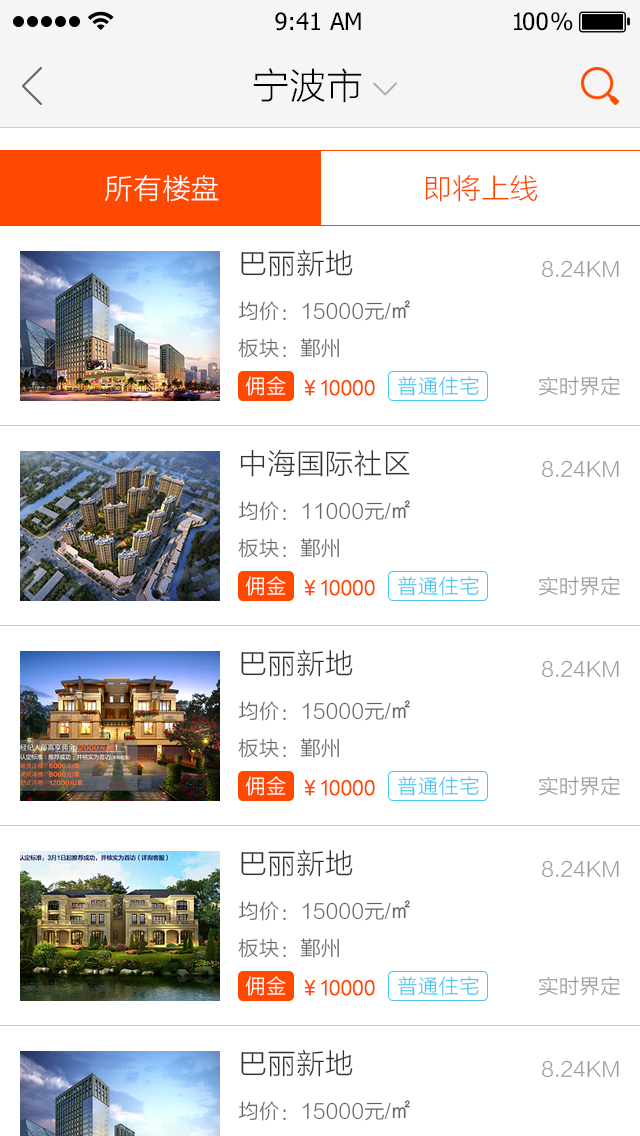
<style>
.page{position:relative;width:640px;height:1136px;background:#ffffff}
.page>*{position:absolute;margin:0}
.t1{font:24px "Tahoma";color:#000000}
.t2{font:24px "Tahoma";letter-spacing:-0.1em;color:#000000}
.t3{font:24px "Tahoma";letter-spacing:-0.25em;color:#000000}
.t4{font:36px "STHeitiSC-Light";color:#000000}
.t5{font:28px "STHeitiSC-Light";color:#ffffff}
.t6{font:28px "STHeitiSC-Light";color:#ff4800}
.t7{font:28px "STHeitiSC-Light";color:#333333}
.t8{font:20px "STHeitiSC-Light";color:#999999}
.t9{font:20px "STHeitiSC-Light";color:#666666}
.t10{font:20px "STHeitiSC-Light";color:#ffffff}
.t11{font:20px "STHeitiSC-Light";color:#47c8f2}
.t12{font:20px "MicrosoftYaHeiLight";color:#ff4800;font-weight:bold}
</style>
<div class="page">
<p class="t1" style="left:275px;top:12px;width:86px;height:19px">9:41 AM</p>
<p class="t2" style="left:514px;top:12px;width:59px;height:19px">1<span class="t1">0</span><span class="t3">0 </span>%</p>
<p class="t4" style="left:253px;top:68px;width:109px;height:35px">宁波市</p>
<p class="t5" style="left:105px;top:174px;width:114px;height:28px">所有楼盘</p>
<p class="t6" style="left:425px;top:175px;width:113px;height:27px">即将上线</p>
<p class="t7" style="left:241px;top:250px;width:112px;height:27px">巴丽新地</p>
<p class="t8" style="left:542px;top:260px;width:77px;height:18px">8.24KM</p>
<p class="t9" style="left:238px;top:300px;width:172px;height:21px">均价：15000元/㎡</p>
<p class="t9" style="left:238px;top:338px;width:101px;height:20px">板块：鄞州</p>
<p class="t10" style="left:245px;top:376px;width:41px;height:20px">佣金</p>
<p class="t11" style="left:397px;top:376px;width:82px;height:20px">普通住宅</p>
<p class="t8" style="left:539px;top:376px;width:81px;height:20px">实时界定</p>
<p class="t12" style="left:304px;top:380px;width:71px;height:16px">￥10000</p>
<p class="t7" style="left:240px;top:449px;width:170px;height:28px">中海国际社区</p>
<p class="t8" style="left:542px;top:460px;width:77px;height:18px">8.24KM</p>
<p class="t9" style="left:238px;top:500px;width:172px;height:21px">均价：11000元/㎡</p>
<p class="t9" style="left:238px;top:538px;width:101px;height:20px">板块：鄞州</p>
<p class="t10" style="left:245px;top:576px;width:41px;height:20px">佣金</p>
<p class="t12" style="left:304px;top:580px;width:71px;height:16px">￥10000</p>
<p class="t11" style="left:397px;top:576px;width:82px;height:20px">普通住宅</p>
<p class="t8" style="left:539px;top:576px;width:81px;height:20px">实时界定</p>
<p class="t7" style="left:241px;top:650px;width:112px;height:27px">巴丽新地</p>
<p class="t8" style="left:542px;top:660px;width:77px;height:18px">8.24KM</p>
<p class="t9" style="left:238px;top:700px;width:172px;height:21px">均价：15000元/㎡</p>
<p class="t9" style="left:238px;top:738px;width:101px;height:20px">板块：鄞州</p>
<p class="t10" style="left:245px;top:776px;width:41px;height:20px">佣金</p>
<p class="t12" style="left:304px;top:780px;width:71px;height:16px">￥10000</p>
<p class="t11" style="left:397px;top:776px;width:82px;height:20px">普通住宅</p>
<p class="t8" style="left:539px;top:776px;width:81px;height:20px">实时界定</p>
<p class="t7" style="left:241px;top:850px;width:112px;height:27px">巴丽新地</p>
<p class="t8" style="left:542px;top:860px;width:77px;height:18px">8.24KM</p>
<p class="t9" style="left:238px;top:900px;width:172px;height:21px">均价：15000元/㎡</p>
<p class="t9" style="left:238px;top:938px;width:101px;height:20px">板块：鄞州</p>
<p class="t10" style="left:245px;top:976px;width:41px;height:20px">佣金</p>
<p class="t11" style="left:397px;top:976px;width:82px;height:20px">普通住宅</p>
<p class="t8" style="left:539px;top:976px;width:81px;height:20px">实时界定</p>
<p class="t12" style="left:304px;top:980px;width:71px;height:16px">￥10000</p>
<p class="t7" style="left:241px;top:1050px;width:112px;height:27px">巴丽新地</p>
<p class="t8" style="left:542px;top:1060px;width:77px;height:18px">8.24KM</p>
<p class="t9" style="left:238px;top:1100px;width:172px;height:21px">均价：15000元/㎡</p>
</div>
